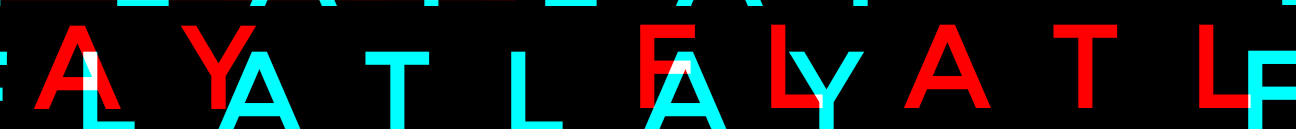
<style>
.page{position:relative;width:1296px;height:129px;background:#000000}
.page>*{position:absolute;margin:0}
.t1{font:119.4px "Montserrat-Regular";letter-spacing:0.005em}
</style>
<div class="page">
<p class="t1" style="left:208px;top:24px;width:912px;height:84px">FLATLAY</p>
</div>
